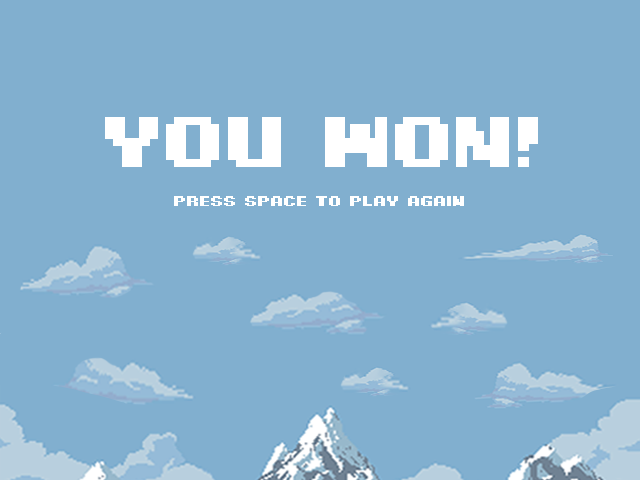
<style>
.page{position:relative;width:640px;height:480px;background:#81afcf}
.page>*{position:absolute;margin:0}
.t1{font:72px "PixelDigivolve";color:#ffffff;font-weight:bold;scale:1.2 1}
.t2{font:14px "PixelDigivolve";color:#ffffff;font-weight:bold;scale:1.2 1}
</style>
<div class="page">
<p class="t1" style="left:105px;top:117px;width:433px;height:50px">You Won!</p>
<p class="t2" style="left:174px;top:196px;width:290px;height:10px">press Space to play again</p>
</div>
